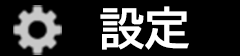
<style>
.page{position:relative;width:240px;height:56px;background:#000000}
.page>*{position:absolute;margin:0}
.t1{font:44.8px "BIZ-UDPGothic-Bold";color:#ffffff}
</style>
<div class="page">
<p class="t1" style="left:100px;top:6px;width:89px;height:44px">設定</p>
</div>
